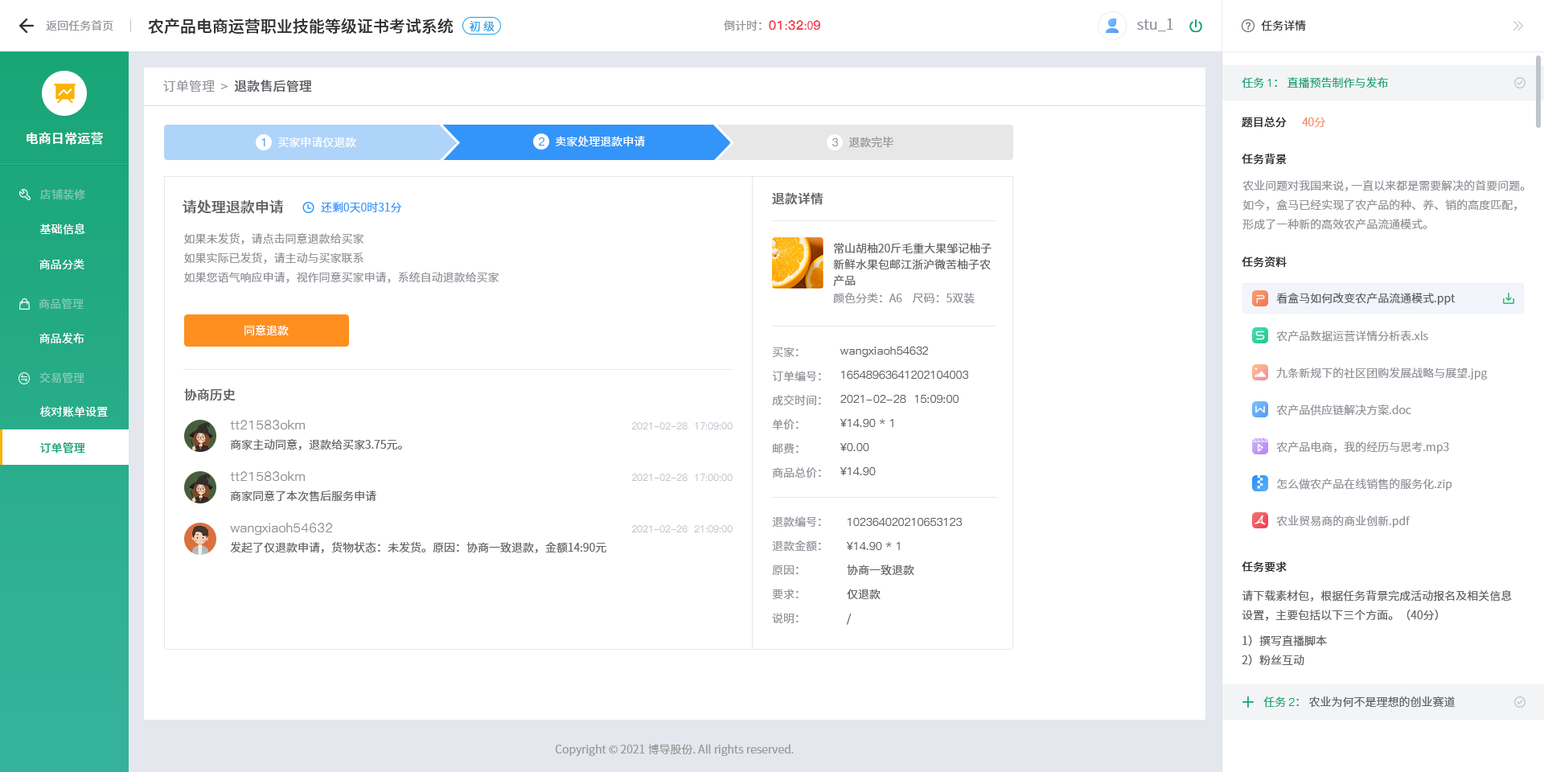
<style>
.page{position:relative;width:1544px;height:772px;background:#ffffff}
.page>*{position:absolute;margin:0}
.t1{font:16.1px "SourceHanSansCN-Medium";color:#303133}
.t2{font:11.3px "SourceHanSansCN-Normal";color:#909399}
.t3{font:11.3px "SourceHanSansCN-Normal";color:#1da0ea}
.t4{font:12.9px "PingFang-SC-Heavy";color:#f63f52}
.t5{font:11.3px "SourceHanSansCN-Normal";color:#f63f52}
.t6{font:14.5px "SourceHanSansCN-Normal";color:#909399}
.t7{font:11.3px "SourceHanSansCN-Normal";color:#303133}
.t8{font:11.3px "SourceHanSansCN-Normal";color:#19a677}
.t9{font:11.3px "PingFang-SC-Medium";color:#19a677}
.t10{font:12.9px "SourceHanSansCN-Normal";letter-spacing:0.01em;color:#909399}
.t11{font:12.9px "SourceHanSansCN-Medium";letter-spacing:0.01em;color:#606266}
.t12{font:11.3px "SourceHanSansCN-Medium";color:#303133}
.t13{font:11.3px "SourceHanSansCN-Light";color:#f67d53}
.t14{font:12.9px "SourceHanSansCN-Medium";letter-spacing:0.01em;color:#ffffff}
.t15{font:11.3px "SourceHanSansCN-Normal";color:#ffffff}
.t16{font:11.3px "PingFang-SC-Medium";color:#3395fa}
.t17{font:11.3px "PingFang-SC-Medium";color:#909399}
.t18{font:11.3px/19.3px "SourceHanSansCN-Normal";color:#909399}
.t19{font:11.3px "SourceHanSansCN-Regular";letter-spacing:0.01em;color:#81c9b0}
.t20{font:12.9px "SourceHanSansCN-Medium";color:#606266}
.t21{font:14.5px "SourceHanSansCN-Medium";color:#606266}
.t22{font:11.3px "SourceHanSansCN-Normal";color:#3395fa}
.t23{font:11.3px "SourceHanSansCN-Normal";letter-spacing:0.01em;color:#ffffff}
.t24{font:11.3px/16.1px "SourceHanSansCN-Normal";color:#606266}
.t25{font:11.3px "SourceHanSansCN-Normal";color:#606266}
.t26{font:11.3px "SourceHanSansCN-Regular";letter-spacing:0.01em;color:#82cab3}
.t27{font:11.3px "SourceHanSansCN-Regular";letter-spacing:0.01em;color:#ffffff}
.t28{font:11.3px/24.1px "SourceHanSansCN-Normal";color:#909399}
.t29{font:11.3px/24.1px "PingFang-SC-Medium";color:#606266}
.t30{font:11.3px "SourceHanSansCN-Regular";letter-spacing:0.01em;color:#83cbb6}
.t31{font:12.9px "PingFang-SC-Medium";color:#909399}
.t32{font:9.7px "PingFang-SC-Medium";color:#c0c4cc}
.t33{font:11.3px "SourceHanSansCN-Medium";letter-spacing:0.01em;color:#19a677}
.t34{font:11.3px/24.1px "SourceHanSansCN-Normal";color:#606266}
.t35{font:11.3px/19.3px "SourceHanSansCN-Normal";color:#606266}
.t36{font:11.3px "PingFang-SC-Medium";color:#1aa678}
.t37{font:11.3px "SourceHanSansCN-Normal";color:#1aa678}
.t38{font:11.3px "SourceHanSansCN-Normal";color:#999999}
</style>
<div class="page">
<p class="t1" style="left:148px;top:18px;width:306px;height:16px">农产品电商运营职业技能等级证书考试系统</p>
<p class="t2" style="left:46px;top:20px;width:67px;height:11px">返回任务首页</p>
<p class="t3" style="left:469px;top:21px;width:26px;height:11px">初 级</p>
<p class="t2" style="left:724px;top:20px;width:96px;height:11px">倒计时：<span class="t4">01</span><span class="t5">:</span><span class="t4">32</span><span class="t5">:0</span><span class="t4">9</span></p>
<p class="t6" style="left:1137px;top:18px;width:37px;height:13px">stu_1</p>
<p class="t7" style="left:1261px;top:20px;width:45px;height:11px">任务详情</p>
<p class="t8" style="left:1242px;top:76px;width:146px;height:12px">任务 <span class="t9">1</span>： 直播预告制作与发布</p>
<p class="t10" style="left:163px;top:80px;width:149px;height:12px">订单管理  &gt;<span class="t11">  退款售后管理</span></p>
<p class="t12" style="left:1242px;top:117px;width:45px;height:11px">题目总分</p>
<p class="t13" style="left:1302px;top:117px;width:24px;height:10px">40分</p>
<p class="t14" style="left:27px;top:132px;width:76px;height:13px">电商日常运营</p>
<p class="t15" style="left:277px;top:137px;width:79px;height:11px">买家申请仅退款</p>
<p class="t16" style="left:539px;top:138px;width:6px;height:8px">2</p>
<p class="t15" style="left:556px;top:136px;width:89px;height:11px">卖家处理退款申请</p>
<p class="t2" style="left:849px;top:137px;width:45px;height:11px">退款完毕</p>
<p class="t16" style="left:261px;top:138px;width:4px;height:8px">1</p>
<p class="t17" style="left:832px;top:138px;width:6px;height:8px">3</p>
<p class="t12" style="left:1242px;top:153px;width:45px;height:12px">任务背景</p>
<p class="t18" style="left:1243px;top:180px;width:282px;height:50px">农业问题对我国来说，一直以来都是需要解决的首要问题。如今，盒马已经实现了农产品的种、养、销的高度匹配，形成了一种新的高效农产品流通模式。</p>
<p class="t19" style="left:40px;top:189px;width:45px;height:11px">店铺装修</p>
<p class="t20" style="left:772px;top:192px;width:52px;height:13px">退款详情</p>
<p class="t21" style="left:183px;top:199px;width:101px;height:15px">请处理退款申请</p>
<p class="t22" style="left:321px;top:202px;width:80px;height:11px">还剩0天0时31分</p>
<p class="t23" style="left:40px;top:223px;width:45px;height:12px">基础信息</p>
<p class="t18" style="left:184px;top:232px;width:315px;height:51px">如果未发货，请点击同意退款给买家<br>如果实际已发货，请主动与买家联系<br>如果您语气响应申请，视作同意买家申请，系统自动退款给买家</p>
<p class="t24" style="left:833px;top:243px;width:159px;height:43px">常山胡柚20斤毛重大果邹记柚子新鲜水果包邮江浙沪微苦柚子农产品</p>
<p class="t12" style="left:1242px;top:256px;width:45px;height:12px">任务资料</p>
<p class="t23" style="left:39px;top:259px;width:45px;height:10px">商品分类</p>
<p class="t2" style="left:833px;top:293px;width:142px;height:11px">颜色分类：A6    尺码：5双装</p>
<p class="t25" style="left:1276px;top:293px;width:180px;height:12px">看盒马如何改变农产品流通模式.ppt</p>
<p class="t26" style="left:39px;top:298px;width:45px;height:12px">商品管理</p>
<p class="t15" style="left:245px;top:325px;width:44px;height:10px">同意退款</p>
<p class="t27" style="left:39px;top:332px;width:45px;height:12px">商品发布</p>
<p class="t2" style="left:1276px;top:331px;width:152px;height:11px">农产品数据运营详情分析表.xls</p>
<p class="t28" style="left:772px;top:347px;width:49px;height:131px">买家：<br>订单编号：<br>成交时间：<br>单价：<br>邮费：<br>商品总价：</p>
<p class="t29" style="left:840px;top:347px;width:128px;height:128px">wangxiaoh54632<br>16548963641202104003<br>2021-02-28  15:09:00<br>¥14.90 * 1<br>¥0.00<br>¥14.90</p>
<p class="t30" style="left:39px;top:372px;width:45px;height:12px">交易管理</p>
<p class="t2" style="left:1276px;top:367px;width:212px;height:13px">九条新规下的社区团购发展战略与展望.jpg</p>
<p class="t20" style="left:184px;top:388px;width:52px;height:13px">协商历史</p>
<p class="t23" style="left:40px;top:406px;width:68px;height:11px">核对账单设置</p>
<p class="t2" style="left:1276px;top:405px;width:136px;height:11px">农产品供应链解决方案.doc</p>
<p class="t31" style="left:230px;top:420px;width:75px;height:10px">tt21583okm</p>
<p class="t32" style="left:632px;top:422px;width:101px;height:8px">2021-02-28  17:09:00</p>
<p class="t33" style="left:40px;top:442px;width:45px;height:12px">订单管理</p>
<p class="t25" style="left:230px;top:439px;width:172px;height:11px">商家主动同意，退款给买家3.75元。</p>
<p class="t2" style="left:1276px;top:442px;width:173px;height:12px">农产品电商，我的经历与思考.mp3</p>
<p class="t31" style="left:230px;top:471px;width:75px;height:10px">tt21583okm</p>
<p class="t32" style="left:632px;top:474px;width:101px;height:7px">2021-02-28  17:00:00</p>
<p class="t2" style="left:1277px;top:479px;width:176px;height:12px">怎么做农产品在线销售的服务化.zip</p>
<p class="t25" style="left:230px;top:491px;width:146px;height:11px">商家同意了本次售后服务申请</p>
<p class="t28" style="left:772px;top:516px;width:49px;height:107px">退款编号：<br>退款金额：<br>原因：<br>要求：<br>说明：</p>
<p class="t29" style="left:846px;top:518px;width:116px;height:107px">102364020210653123<br>¥14.90 * 1<br><span class="t34">协商一致退款<br>仅退款<br>/</span></p>
<p class="t2" style="left:1276px;top:516px;width:135px;height:12px">农业贸易商的商业创新.pdf</p>
<p class="t31" style="left:230px;top:523px;width:102px;height:12px">wangxiaoh54632</p>
<p class="t32" style="left:632px;top:525px;width:101px;height:7px">2021-02-26  21:09:00</p>
<p class="t25" style="left:230px;top:541px;width:376px;height:12px">发起了仅退款申请，货物状态：未发货。原因：协商一致退款，金额14:90元</p>
<p class="t12" style="left:1242px;top:561px;width:45px;height:12px">任务要求</p>
<p class="t35" style="left:1242px;top:590px;width:270px;height:76px">请下载素材包，根据任务背景完成活动报名及相关信息设置，主要包括以下三个方面。（40分）<br>1）撰写直播脚本<br>2）粉丝互动</p>
<p class="t25" style="left:1264px;top:697px;width:191px;height:11px"><span class="t8">任务 </span><span class="t36">2</span><span class="t37">：</span> 农业为何不是理想的创业赛道</p>
<p class="t38" style="left:555px;top:744px;width:239px;height:12px">Copyright © 2021 博导股份. All rights reserved.</p>
</div>
